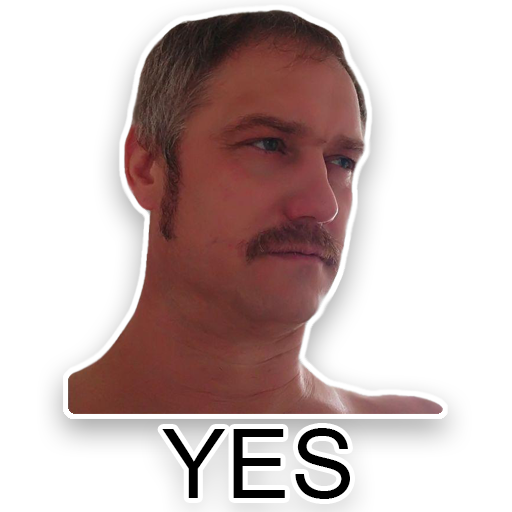
<style>
.page{position:relative;width:512px;height:512px;background:#ffffff}
.page>*{position:absolute;margin:0}
.t1{font:96px "ArialMT";color:#000000}
</style>
<div class="page">
<p class="t1" style="left:162px;top:428px;width:188px;height:71px">YES</p>
</div>
